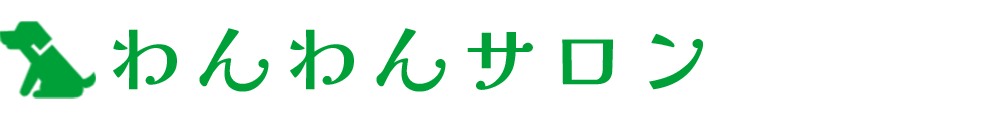
<style>
.page{position:relative;width:1000px;height:120px;background:#ffffff}
.page>*{position:absolute;margin:0}
.t1{font:80.6px "KaiseiDecol-Bold";letter-spacing:0.1em;color:#00a038}
</style>
<div class="page">
<p class="t1" style="left:113px;top:28px;width:590px;height:64px">わんわんサロン</p>
</div>
